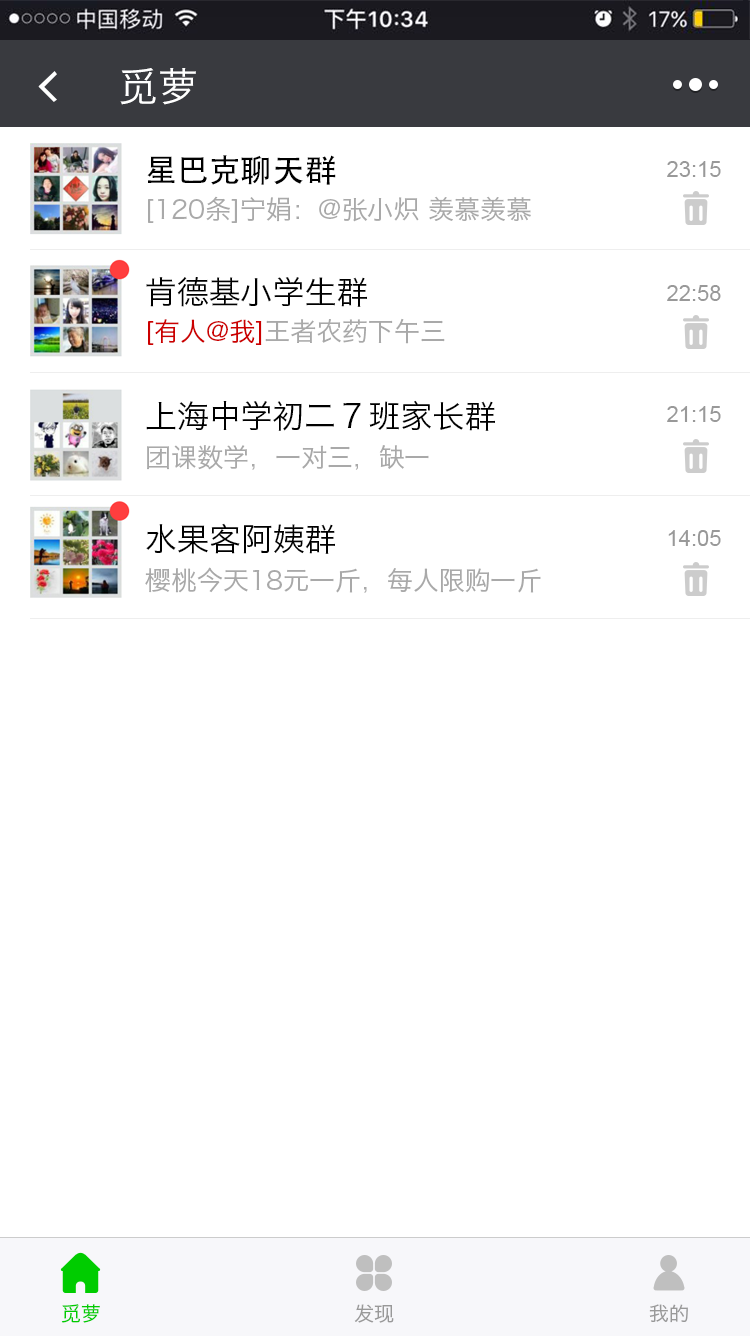
<style>
.page{position:relative;width:750px;height:1336px;background:#ffffff}
.page>*{position:absolute;margin:0}
.t1{font:40px "HiraginoSansGB-W3";color:#ffffff}
.t2{font:32px "AdobeHeitiStd-Regular";color:#000000}
.t3{font:22px "ArialMT";color:#999999}
.t4{font:26px "HiraginoSansGB-W3";color:#a9a9a9}
.t5{font:32px "HiraginoSansGB-W3";color:#000000}
.t6{font:26px "HiraginoSansGB-W3";color:#cc0000}
.t7{font:20px "HiraginoSansGB-W3";color:#00cc00}
.t8{font:20px "HiraginoSansGB-W3";color:#999999}
</style>
<div class="page">
<p class="t1" style="left:120px;top:68px;width:76px;height:37px">觅萝</p>
<p class="t2" style="left:147px;top:155px;width:189px;height:30px">星巴克聊天群</p>
<p class="t3" style="left:667px;top:161px;width:54px;height:16px">23:15</p>
<p class="t4" style="left:148px;top:196px;width:383px;height:27px">[120条]宁娟：@张小炽 羡慕羡慕</p>
<p class="t5" style="left:146px;top:277px;width:221px;height:30px">肯德基小学生群</p>
<p class="t3" style="left:667px;top:285px;width:54px;height:16px">22:58</p>
<p class="t4" style="left:148px;top:318px;width:297px;height:27px"><span class="t6">[有人@我]</span>王者农药下午三点</p>
<p class="t5" style="left:146px;top:400px;width:349px;height:31px">上海中学初二７班家长群</p>
<p class="t3" style="left:667px;top:406px;width:54px;height:16px">21:15</p>
<p class="t4" style="left:147px;top:445px;width:282px;height:25px">团课数学，一对三，缺一</p>
<p class="t5" style="left:146px;top:523px;width:189px;height:31px">水果客阿姨群</p>
<p class="t3" style="left:668px;top:530px;width:53px;height:16px">14:05</p>
<p class="t4" style="left:145px;top:567px;width:396px;height:26px">樱桃今天18元一斤，每人限购一斤</p>
<p class="t7" style="left:61px;top:1304px;width:39px;height:19px">觅萝</p>
<p class="t8" style="left:354px;top:1304px;width:40px;height:19px">发现</p>
<p class="t8" style="left:649px;top:1304px;width:39px;height:19px">我的</p>
</div>
